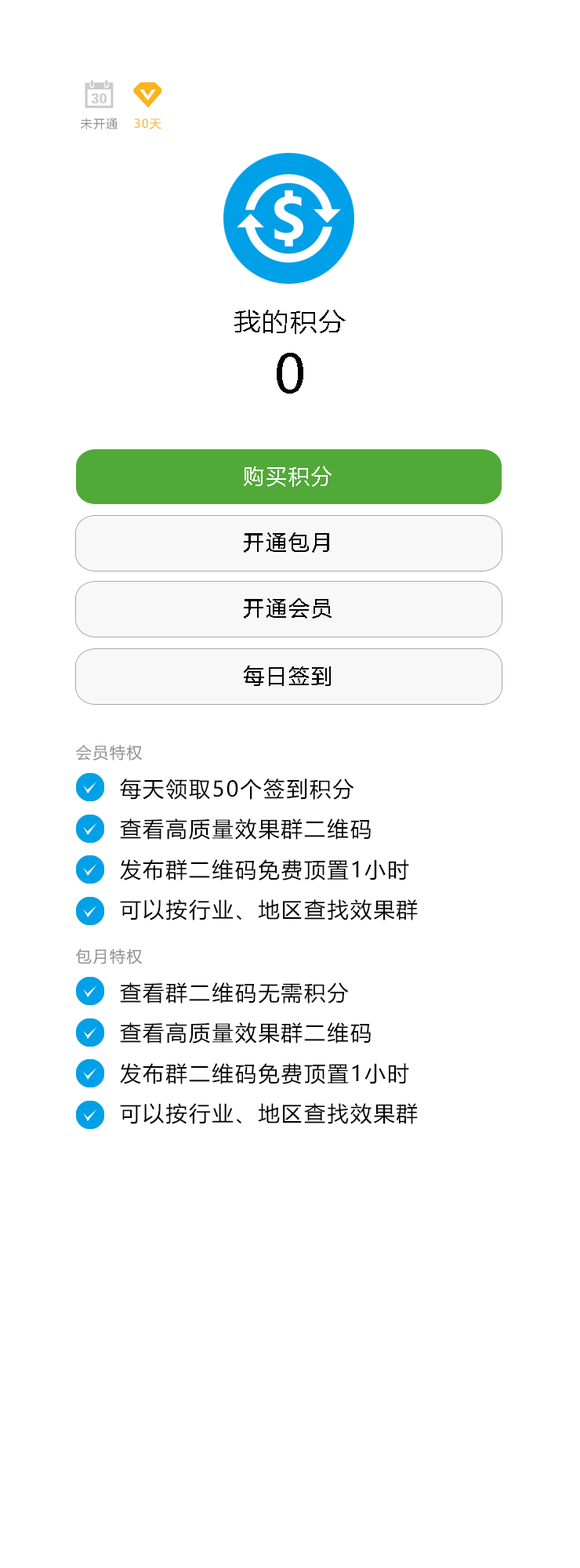
<style>
.page{position:relative;width:580px;height:1568px;background:#ffffff}
.page>*{position:absolute;margin:0}
.t1{font:11.8px "MicrosoftYaHei";letter-spacing:0.08em;color:#929191}
.t2{font:11.8px "MicrosoftYaHei";letter-spacing:0.08em;color:#ffb410}
.t3{font:26.3px "MicrosoftYaHei";letter-spacing:0.08em;color:#000000}
.t4{font:51.9px "MicrosoftYaHei";color:#000000}
.t5{font:21.4px "MicrosoftYaHei";letter-spacing:0.08em;color:#ffffff}
.t6{font:21.4px "MicrosoftYaHei";letter-spacing:0.08em;color:#000000}
.t7{font:15.7px "MicrosoftYaHei";letter-spacing:0.08em;color:#929191}
</style>
<div class="page">
<p class="t1" style="left:81px;top:118px;width:37px;height:11px">未开通</p>
<p class="t2" style="left:134px;top:118px;width:28px;height:11px">30天</p>
<p class="t3" style="left:234px;top:310px;width:112px;height:24px">我的积分</p>
<p class="t4" style="left:277px;top:353px;width:26px;height:41px">0</p>
<p class="t5" style="left:244px;top:466px;width:88px;height:21px">购买积分</p>
<p class="t6" style="left:244px;top:532px;width:85px;height:21px">开通包月</p>
<p class="t6" style="left:244px;top:598px;width:88px;height:21px">开通会员</p>
<p class="t6" style="left:244px;top:666px;width:87px;height:20px">每日签到</p>
<p class="t7" style="left:76px;top:745px;width:67px;height:15px">会员特权</p>
<p class="t6" style="left:120px;top:779px;width:234px;height:21px">每天领取50个签到积分</p>
<p class="t6" style="left:120px;top:818px;width:251px;height:22px">查看高质量效果群二维码</p>
<p class="t6" style="left:120px;top:859px;width:289px;height:21px">发布群二维码免费顶置1小时</p>
<p class="t6" style="left:120px;top:899px;width:298px;height:21px">可以按行业、地区查找效果群</p>
<p class="t7" style="left:76px;top:949px;width:67px;height:15px">包月特权</p>
<p class="t6" style="left:120px;top:982px;width:229px;height:22px">查看群二维码无需积分</p>
<p class="t6" style="left:120px;top:1022px;width:251px;height:22px">查看高质量效果群二维码</p>
<p class="t6" style="left:120px;top:1063px;width:289px;height:21px">发布群二维码免费顶置1小时</p>
<p class="t6" style="left:120px;top:1103px;width:298px;height:21px">可以按行业、地区查找效果群</p>
</div>
